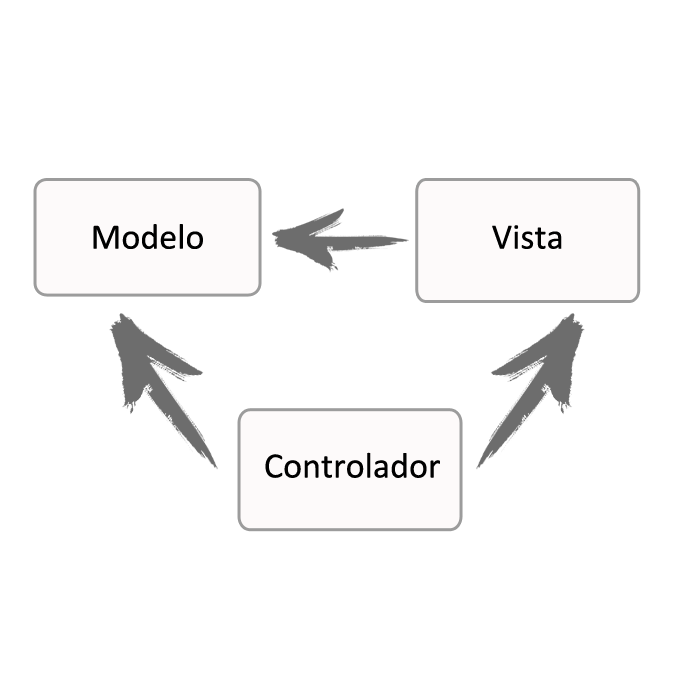
<style>
.page{position:relative;width:700px;height:700px;background:#ffffff}
.page>*{position:absolute;margin:0}
.t1{font:36px "Calibri";color:#000000}
.t2{font:24px "Calibri";color:#000000}
</style>
<div class="page">
<p class="t1" style="left:93px;top:224px;width:110px;height:25px">Modelo</p>
<p class="t1" style="left:492px;top:225px;width:70px;height:24px">Vista</p>
<p class="t1" style="left:265px;top:452px;width:175px;height:26px"><span class="t2"><br></span>Controlador</p>
</div>
